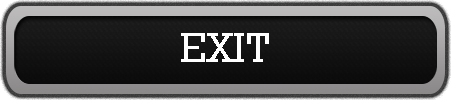
<style>
.page{position:relative;width:451px;height:100px}
.page>*{position:absolute;margin:0}
.t1{font:41.7px "Rockwell";color:#ffffff}
</style>
<div class="page">
<p class="t1" style="left:181px;top:33px;width:88px;height:29px">EXIT</p>
</div>
